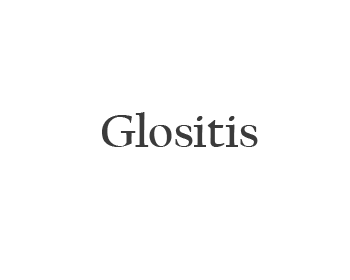
<style>
.page{position:relative;width:350px;height:280px;background:#ffffff}
.page>*{position:absolute;margin:0}
.t1{font:48px "CalifornianFB-Bold";color:#3b3b3b}
</style>
<div class="page">
<p class="t1" style="left:102px;top:112px;width:156px;height:35px">Glositis</p>
</div>
